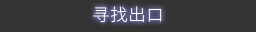
<style>
.page{position:relative;width:256px;height:32px;background:#333333}
.page>*{position:absolute;margin:0}
.t1{font:17px "NotoSansSC-Thin";letter-spacing:0.06em;color:#ffffff}
</style>
<div class="page">
<p class="t1" style="left:93px;top:6px;width:69px;height:16px">寻找出口</p>
</div>
